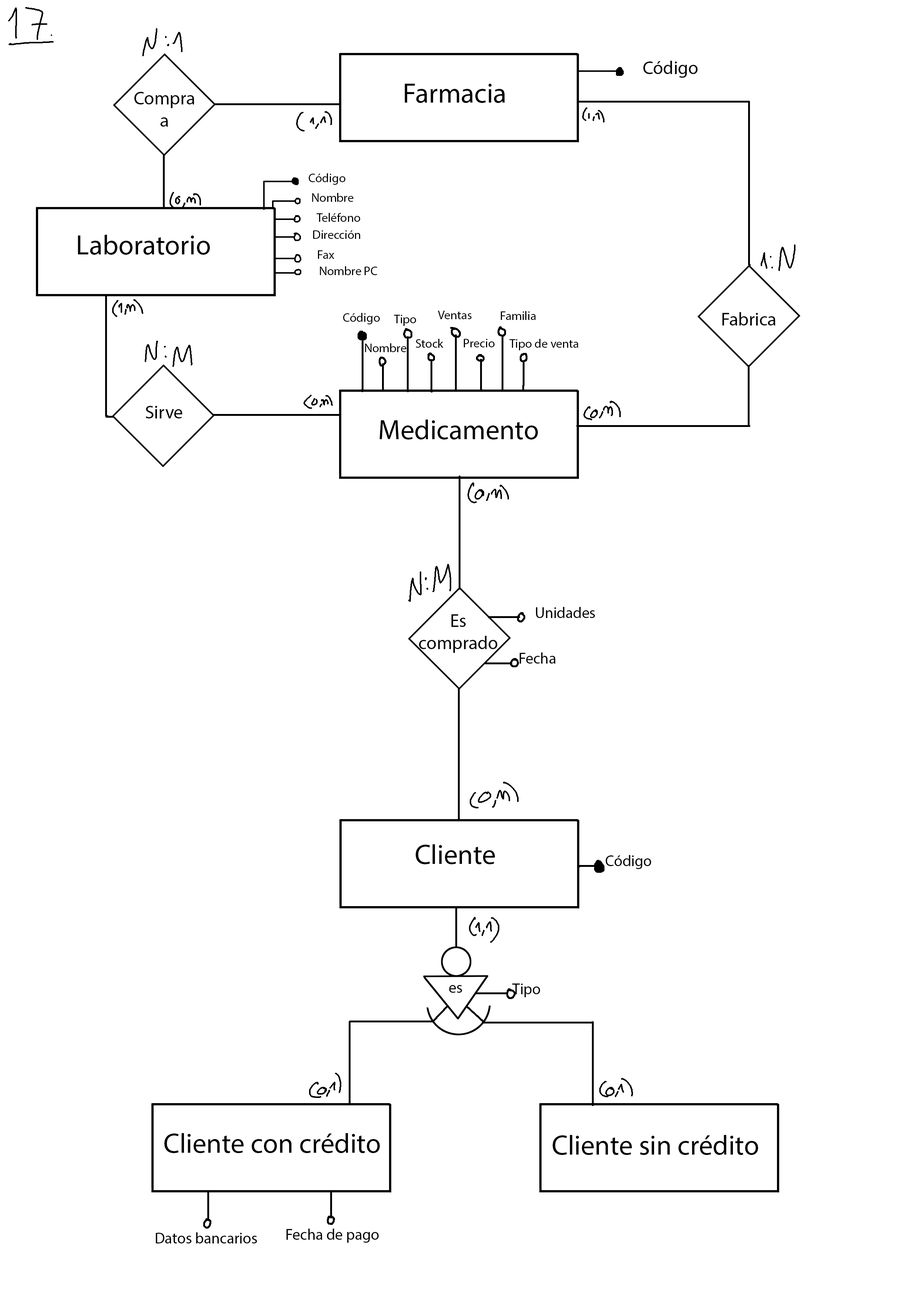
<style>
.page{position:relative;width:918px;height:1299px;background:#ffffff}
.page>*{position:absolute;margin:0}
.t1{font:18.5px "MyriadPro-Regular";color:#000000}
.t2{font:27.8px "MyriadPro-Regular";color:#000000}
.t3{font:12.3px "MyriadPro-Regular";color:#000000}
.t4{font:15.4px "MyriadPro-Regular";color:#000000}
</style>
<div class="page">
<p class="t1" style="left:643px;top:61px;width:55px;height:17px">Código</p>
<p class="t2" style="left:405px;top:84px;width:100px;height:19px">Farmacia</p>
<p class="t1" style="left:134px;top:92px;width:60px;height:35px;text-align:center">Compra<br>a</p>
<p class="t3" style="left:309px;top:173px;width:36px;height:12px">Código</p>
<p class="t3" style="left:312px;top:193px;width:42px;height:9px">Nombre</p>
<p class="t3" style="left:317px;top:213px;width:43px;height:9px">Teléfono</p>
<p class="t3" style="left:313px;top:230px;width:47px;height:9px">Dirección</p>
<p class="t2" style="left:78px;top:235px;width:132px;height:20px">Laboratorio</p>
<p class="t3" style="left:318px;top:250px;width:16px;height:9px">Fax</p>
<p class="t3" style="left:320px;top:266px;width:57px;height:9px">Nombre PC</p>
<p class="t3" style="left:343px;top:313px;width:37px;height:11px">Código</p>
<p class="t3" style="left:394px;top:315px;width:22px;height:11px">Tipo</p>
<p class="t3" style="left:438px;top:311px;width:34px;height:8px">Ventas</p>
<p class="t3" style="left:501px;top:311px;width:35px;height:9px">Familia</p>
<p class="t1" style="left:722px;top:312px;width:54px;height:13px">Fabrica</p>
<p class="t3" style="left:416px;top:339px;width:28px;height:9px">Stock</p>
<p class="t3" style="left:464px;top:339px;width:31px;height:8px">Precio</p>
<p class="t3" style="left:509px;top:339px;width:69px;height:11px">Tipo de venta</p>
<p class="t3" style="left:365px;top:343px;width:42px;height:9px">Nombre</p>
<p class="t1" style="left:145px;top:406px;width:38px;height:12px">Sirve</p>
<p class="t2" style="left:379px;top:419px;width:159px;height:20px">Medicamento</p>
<p class="t1" style="left:419px;top:614px;width:79px;height:39px;text-align:center">Es<br>comprado</p>
<p class="t4" style="left:536px;top:607px;width:59px;height:11px">Unidades</p>
<p class="t4" style="left:520px;top:652px;width:36px;height:11px">Fecha</p>
<p class="t2" style="left:416px;top:844px;width:79px;height:20px">Cliente</p>
<p class="t4" style="left:606px;top:855px;width:45px;height:14px">Código</p>
<p class="t4" style="left:449px;top:985px;width:13px;height:8px">es</p>
<p class="t4" style="left:512px;top:983px;width:28px;height:14px">Tipo</p>
<p class="t2" style="left:164px;top:1133px;width:216px;height:20px">Cliente con crédito</p>
<p class="t2" style="left:553px;top:1135px;width:205px;height:20px">Cliente sin crédito</p>
<p class="t4" style="left:287px;top:1228px;width:92px;height:14px">Fecha de pago</p>
<p class="t4" style="left:156px;top:1232px;width:101px;height:11px">Datos bancarios</p>
</div>
